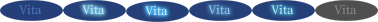
<style>
.page{position:relative;width:378px;height:22px;background:#254079}
.page>*{position:absolute;margin:0}
.t1{font:14px "OfficialFateFont-Medium";color:#507ac3}
.t2{font:14px "OfficialFateFont-Medium";color:#c1f1fc}
.t3{font:14px "OfficialFateFont-Medium";color:#cff7fe}
.t4{font:14px "OfficialFateFont-Medium";color:#8cd2f6}
.t5{font:14px "OfficialFateFont-Medium";color:#8d8d8d}
</style>
<div class="page">
<p class="t1" style="left:19px;top:4px;width:23px;height:11px">Vita</p>
<p class="t2" style="left:82px;top:4px;width:23px;height:11px">Vita</p>
<p class="t3" style="left:145px;top:5px;width:23px;height:11px">Vita</p>
<p class="t4" style="left:208px;top:4px;width:23px;height:11px">Vita</p>
<p class="t2" style="left:271px;top:4px;width:23px;height:11px">Vita</p>
<p class="t5" style="left:334px;top:4px;width:23px;height:11px">Vita</p>
</div>
